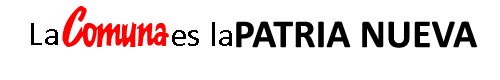
<style>
.page{position:relative;width:500px;height:80px;background:#ffffff}
.page>*{position:absolute;margin:0}
.t1{font:45px "KentuckyFriedChickenFont";color:#ff0000}
.t2{font:35px "Calibri";color:#000000}
.t3{font:40px "Calibri-Bold";color:#000000}
</style>
<div class="page">
<p class="t1" style="left:62px;top:6px;width:107px;height:41px">Comuna</p>
<p class="t2" style="left:31px;top:23px;width:27px;height:22px">La</p>
<p class="t2" style="left:172px;top:22px;width:60px;height:24px">es la</p>
<p class="t3" style="left:236px;top:21px;width:241px;height:27px">PATRIA NUEVA</p>
</div>
